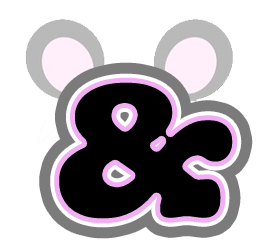
<style>
.page{position:relative;width:279px;height:252px;background:#ffffff}
.page>*{position:absolute;margin:0}
.t1{font:200px "Olivita-Regular";color:#000000;font-weight:bold}
</style>
<div class="page">
<p class="t1" style="left:54px;top:77px;width:184px;height:147px">&amp;</p>
</div>
